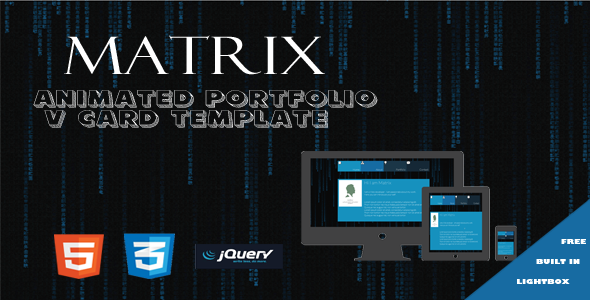
<style>
.page{position:relative;width:590px;height:300px}
.page>*{position:absolute;margin:0}
.t1{font:51.8px "FelixTitlingMT";color:#ffffff;text-transform:uppercase;scale:1.29 1}
.t2{font:17.3px/15.8px "101BlockLetterZ";color:#ffffff;text-transform:uppercase;scale:1.29 1}
.t3{font:6.5px/15.8px "GillSans-UltraBold";color:#ffffff;text-transform:uppercase;scale:1.29 1}
.t4{font:8.6px/15.8px "GillSans-UltraBold";color:#ffffff;text-transform:uppercase;scale:1.29 1}
</style>
<div class="page">
<p class="t1" style="left:64px;top:35px;width:261px;height:40px">MAtrix</p>
<p class="t2" style="left:33px;top:90px;width:345px;height:38px">Animated PorTfolio<br> V card TemplAte</p>
<p class="t3" style="left:517px;top:239px;width:69px;height:45px"><span class="t4">                  </span><br>                              Free <br>                     Built in<br>              lightbox</p>
</div>
